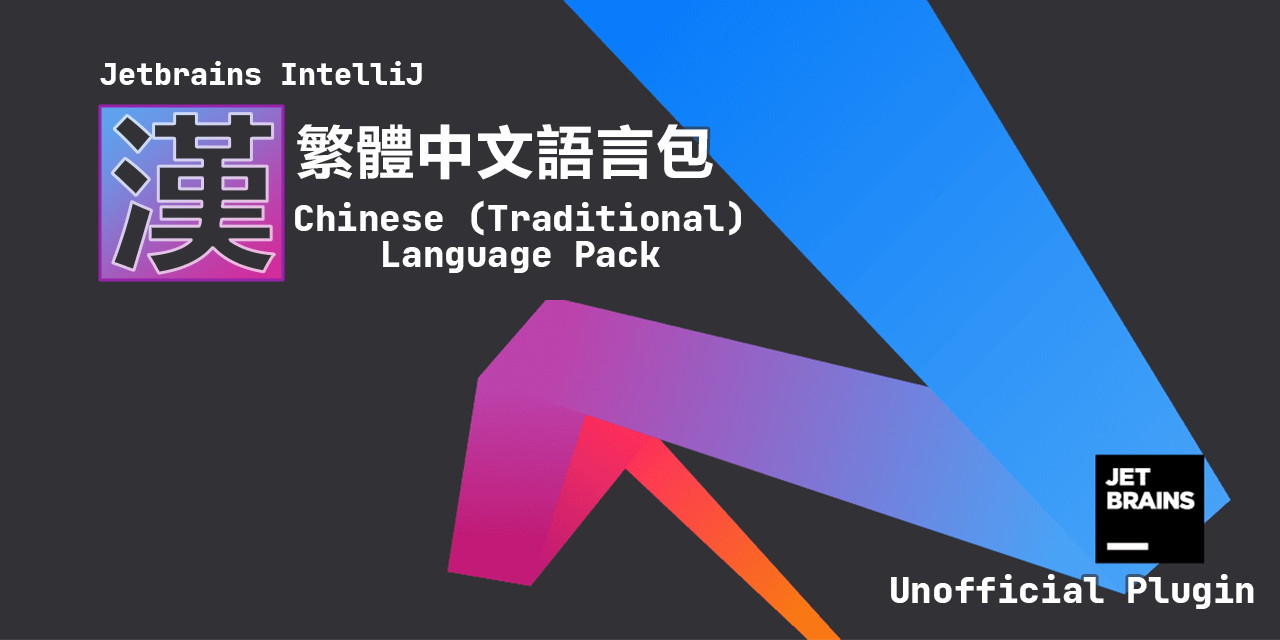
<style>
.page{position:relative;width:1280px;height:640px;background:#323236}
.page>*{position:absolute;margin:0}
.t1{font:30px "JetBrainsMono-ExtraBold";color:#ffffff}
.t2{font:174px "FZLTCHK--GBK1-0";color:#323236}
.t3{font:60px "FZLTCHK--GBK1-0";color:#ffffff}
.t4{font:36px/36px "JetBrainsMono-ExtraBold";color:#ffffff}
.t5{font:36px "JetBrainsMono-ExtraBold";color:#ffffff}
</style>
<div class="page">
<p class="t1" style="left:100px;top:61px;width:322px;height:24px">Jetbrains IntelliJ</p>
<p class="t2" style="left:112px;top:113px;width:163px;height:161px">漢</p>
<p class="t3" style="left:297px;top:124px;width:416px;height:56px">繁體中文語言包</p>
<p class="t4" style="left:295px;top:200px;width:446px;height:73px;text-align:center">Chinese (Traditional)<br>Language Pack</p>
<p class="t5" style="left:891px;top:574px;width:363px;height:35px">Unofficial Plugin</p>
</div>
